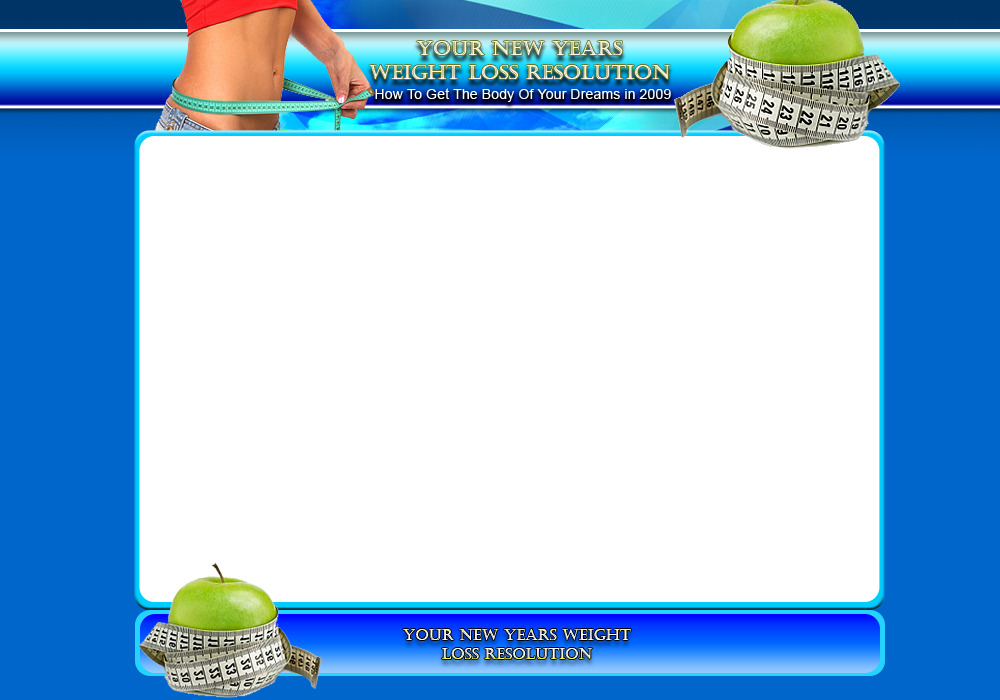
<style>
.page{position:relative;width:1000px;height:700px;background:#ffffff}
.page>*{position:absolute;margin:0}
.t1{font:20.5px "Castellar";color:#fbfbf4}
.t2{font:14.3px "ArialMT";color:#ffffff}
.t3{font:15.3px "Castellar"}
</style>
<div class="page">
<p class="t1" style="left:369px;top:41px;width:302px;height:38px;text-align:center">Your New Years <br>Weight Loss Resolution</p>
<p class="t2" style="left:375px;top:88px;width:296px;height:14px">How To Get The Body Of Your Dreams in 2009</p>
<p class="t3" style="left:403px;top:629px;width:228px;height:30px;text-align:center">Your New Years Weight Loss Resolution</p>
</div>
